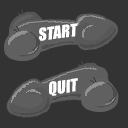
<style>
.page{position:relative;width:128px;height:128px;background:#333333}
.page>*{position:absolute;margin:0}
.t1{font:16px "Impact";color:#ffffff;font-style:italic}
</style>
<div class="page">
<p class="t1" style="left:39px;top:23px;width:39px;height:18px;rotate:-7deg">START</p>
<p class="t1" style="left:49px;top:78px;width:29px;height:18px;rotate:-9deg">QUIT</p>
</div>
